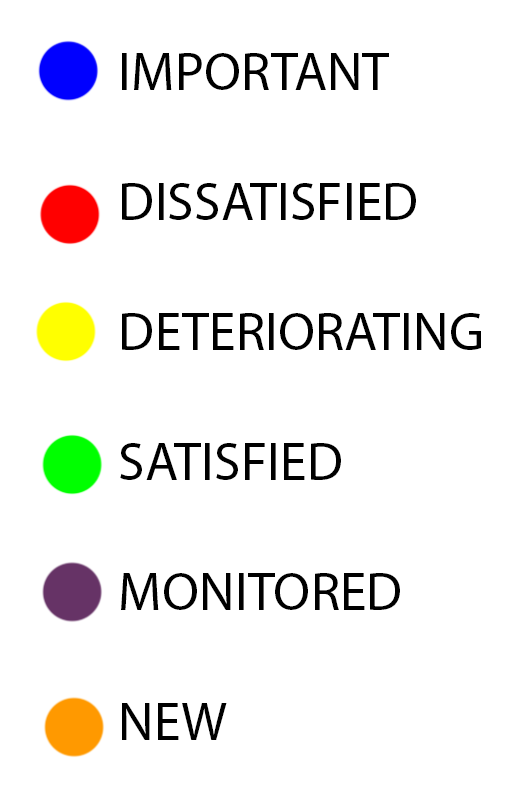
<style>
.page{position:relative;width:525px;height:798px;background:#ffffff}
.page>*{position:absolute;margin:0}
.t1{font:54.2px "MyriadPro-Regular";color:#000000}
</style>
<div class="page">
<p class="t1" style="left:120px;top:53px;width:361px;height:687px">IMPORTANT<br><br>DISSATISFIED<br><br>DETERIORATING<br><br>SATISFIED<br><br>MONITORED<br><br>NEW</p>
</div>
